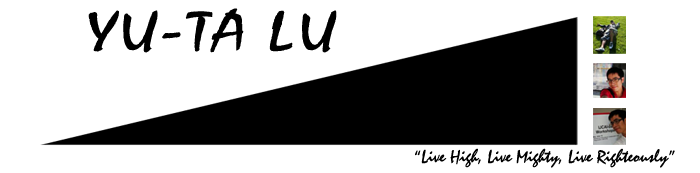
<style>
.page{position:relative;width:700px;height:173px;background:#ffffff}
.page>*{position:absolute;margin:0}
.t1{font:54.2px "Staccato222BT-Regular";color:#000000;scale:1.32 1}
.t2{font:18px "Staccato222BT-Regular";color:#000000}
</style>
<div class="page">
<p class="t1" style="left:88px;top:8px;width:249px;height:45px">YU-TA LU</p>
<p class="t2" style="left:415px;top:148px;width:260px;height:20px">“Live High, Live Mighty, Live Righteously”</p>
</div>
